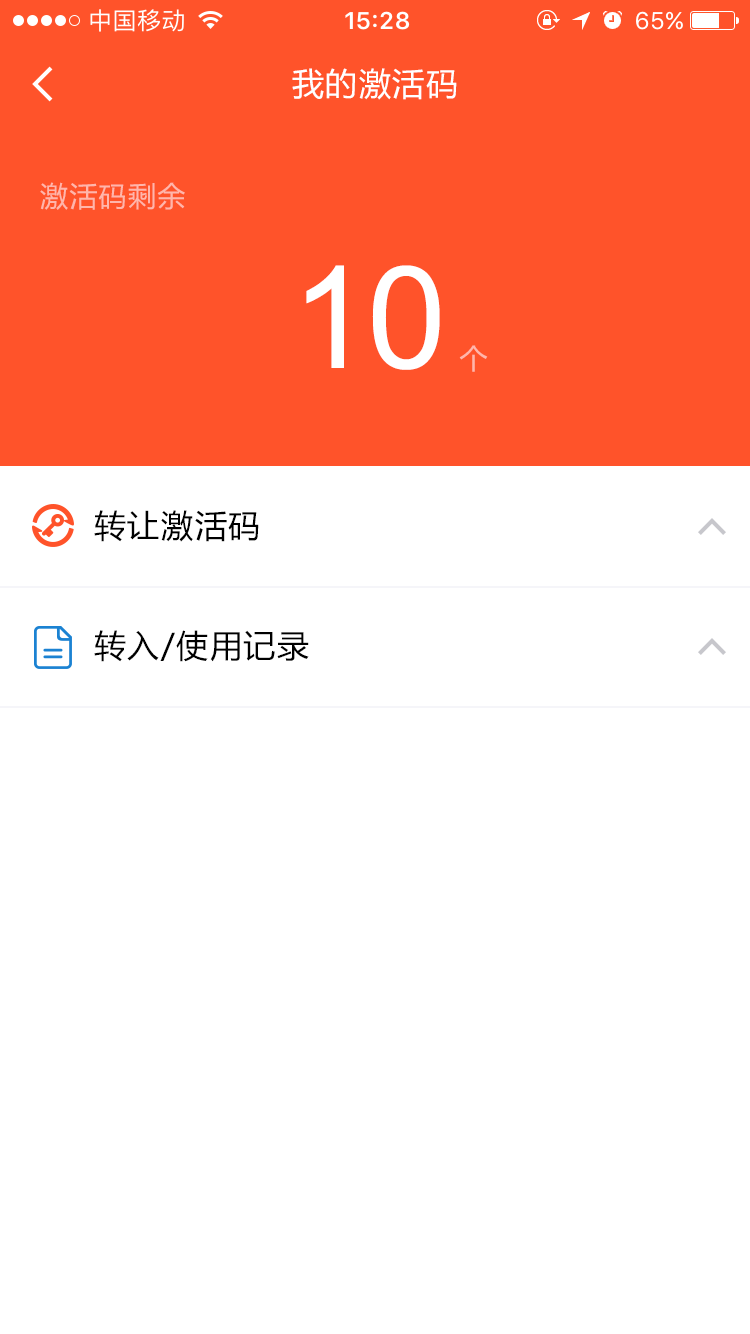
<style>
.page{position:relative;width:750px;height:1334px;background:#ffffff}
.page>*{position:absolute;margin:0}
.t1{font:32px "MicrosoftYaHei";letter-spacing:0.05em;color:#ffffff}
.t2{font:28px "MicrosoftYaHei";letter-spacing:0.05em;color:#ffb6ab}
.t3{font:142.5px "ArialMT";letter-spacing:-0.022em;color:#ffffff}
.t4{font:32px "MicrosoftYaHei";letter-spacing:0.05em;color:#000000}
</style>
<div class="page">
<p class="t1" style="left:292px;top:68px;width:165px;height:32px">我的激活码</p>
<p class="t2" style="left:40px;top:182px;width:145px;height:28px">激活码剩余</p>
<p class="t3" style="left:306px;top:265px;width:134px;height:105px">10</p>
<p class="t2" style="left:459px;top:345px;width:29px;height:27px">个</p>
<p class="t4" style="left:94px;top:510px;width:165px;height:32px">转让激活码</p>
<p class="t4" style="left:94px;top:630px;width:215px;height:32px">转入/使用记录</p>
</div>
